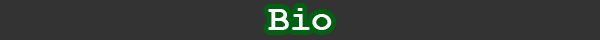
<style>
.page{position:relative;width:600px;height:40px;background:#333333}
.page>*{position:absolute;margin:0}
.t1{font:36px "CourierNewPS-BoldMT";color:#ffffff}
</style>
<div class="page">
<p class="t1" style="left:268px;top:8px;width:64px;height:22px">Bio</p>
</div>
